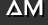
<style>
.page{position:relative;width:48px;height:25px;background:#333333}
.page>*{position:absolute;margin:0}
.t1{font:24px "EarthOrbiterExtra-Bold";color:#ffffff}
</style>
<div class="page">
<p class="t1" style="left:6px;top:0px;width:37px;height:17px">am</p>
</div>
